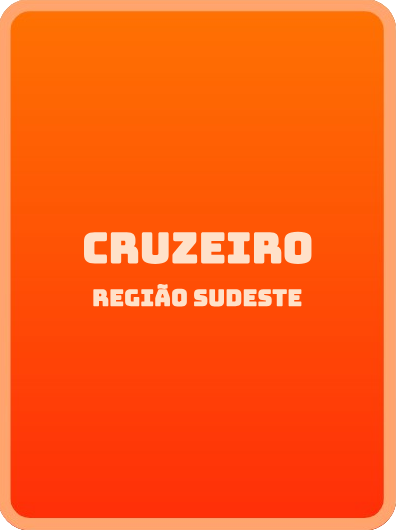
<style>
.page{position:relative;width:396px;height:530px}
.page>*{position:absolute;margin:0}
.t1{font:42px "BungeeLayers-Outline";color:#ffe1c9}
.t2{font:23px "BungeeLayers-Outline";color:#ffe1c9}
</style>
<div class="page">
<p class="t1" style="left:84px;top:231px;width:228px;height:34px">CRUZEIRO</p>
<p class="t2" style="left:93px;top:284px;width:209px;height:23px">REGIÃO SUDESTE</p>
</div>
